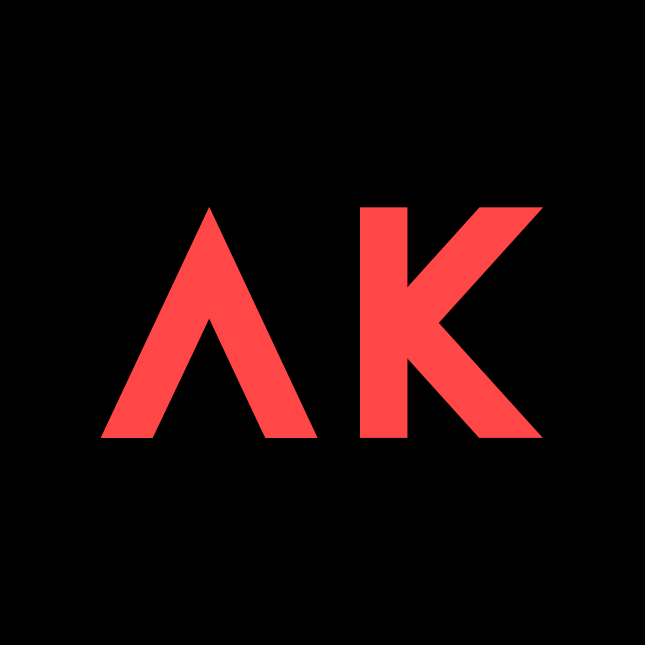
<style>
.page{position:relative;width:645px;height:645px;background:#000000}
.page>*{position:absolute;margin:0}
.t1{font:256px "BIOWEAPON-Regular";letter-spacing:0.04em;color:#ff4747}
</style>
<div class="page">
<p class="t1" style="left:100px;top:207px;width:443px;height:231px">AK</p>
</div>
